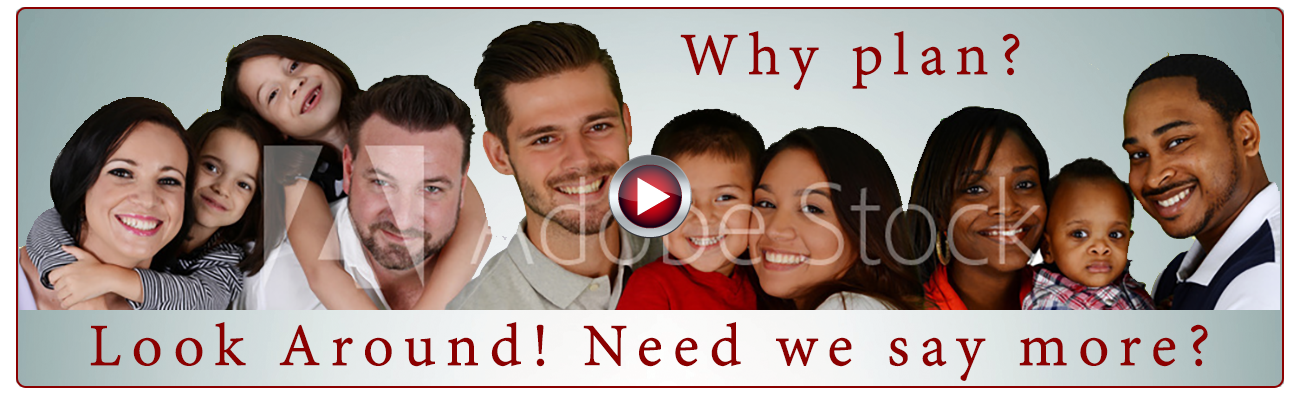
<style>
.page{position:relative;width:1300px;height:394px}
.page>*{position:absolute;margin:0}
.t1{font:64.8px "AdobeDevanagari-Regular";letter-spacing:0.15em;color:#8b0000;font-weight:bold}
</style>
<div class="page">
<p class="t1" style="left:680px;top:31px;width:340px;height:59px">Why plan?</p>
<p class="t1" style="left:90px;top:322px;width:1118px;height:59px">Look Around! Need we say more?</p>
</div>
